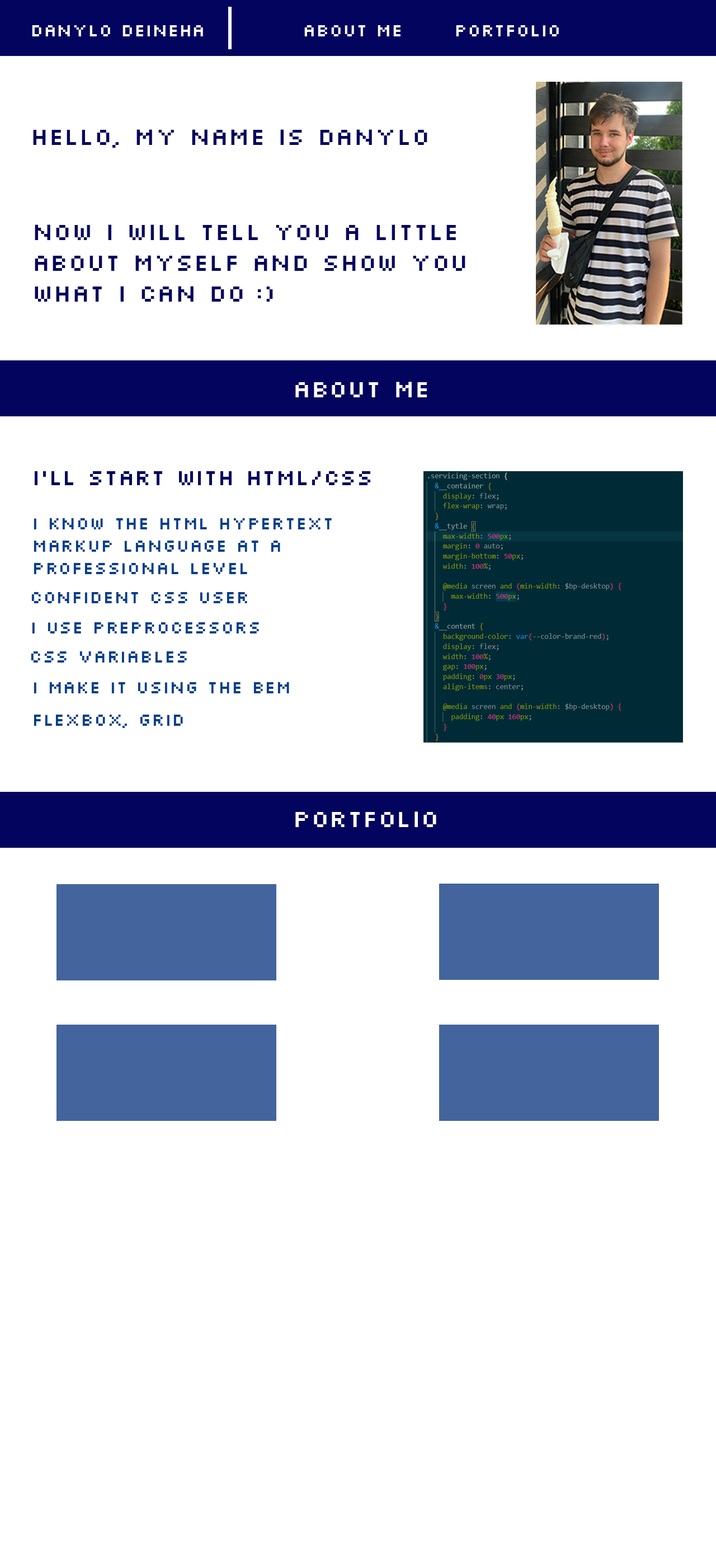
<style>
.page{position:relative;width:716px;height:1568px;background:#ffffff}
.page>*{position:absolute;margin:0}
.t1{font:18.7px "Silkscreen[RusbyMr.Enot]";color:#ffffff}
.t2{font:25.6px "Silkscreen[RusbyMr.Enot]";color:#03045e}
.t3{font:25.6px "Silkscreen[RusbyMr.Enot]";color:#ffffff}
.t4{font:23.3px "Silkscreen[RusbyMr.Enot]";color:#03045e}
.t5{font:18.7px "Silkscreen[RusbyMr.Enot]";color:#023e8a}
</style>
<div class="page">
<p class="t1" style="left:32px;top:25px;width:171px;height:11px">Danylo Deineha</p>
<p class="t1" style="left:304px;top:25px;width:97px;height:11px">About me</p>
<p class="t1" style="left:456px;top:25px;width:103px;height:11px">Portfolio</p>
<p class="t2" style="left:33px;top:129px;width:395px;height:19px">Hello, my name is Danylo</p>
<p class="t2" style="left:35px;top:224px;width:431px;height:78px">Now I will tell you a little about myself and show you what I can do :)</p>
<p class="t3" style="left:295px;top:382px;width:132px;height:15px">About me</p>
<p class="t4" style="left:35px;top:471px;width:335px;height:14px">I'll start with HTML/CSS</p>
<p class="t5" style="left:34px;top:518px;width:298px;height:56px">I know the HTML hypertext markup language at a professional level</p>
<p class="t5" style="left:31px;top:592px;width:216px;height:11px">Confident CSS user</p>
<p class="t5" style="left:32px;top:622px;width:227px;height:11px">I use preprocessors</p>
<p class="t5" style="left:31px;top:651px;width:156px;height:12px">CSS variables</p>
<p class="t5" style="left:34px;top:682px;width:255px;height:11px">I make it using the BEM methodology</p>
<p class="t5" style="left:34px;top:715px;width:149px;height:13px">FlexBox, Grid</p>
<p class="t3" style="left:295px;top:811px;width:141px;height:16px">Portfolio</p>
</div>
